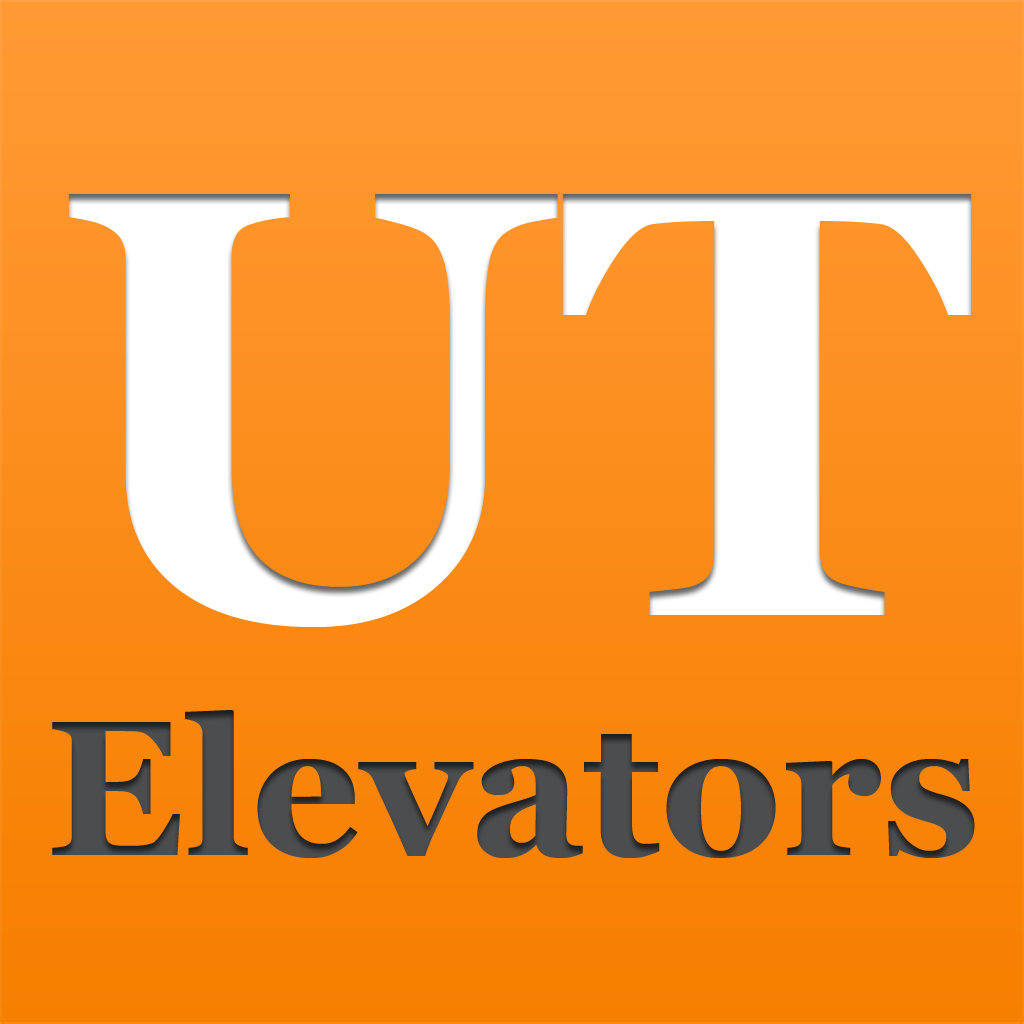
<style>
.page{position:relative;width:1024px;height:1024px}
.page>*{position:absolute;margin:0}
.t1{font:192px/240px "Georgia-Bold";color:#4c4d4f}
.t2{font:608px/240px "Georgia-Bold";color:#ffffff}
</style>
<div class="page">
<p class="t1" style="left:52px;top:194px;width:923px;height:664px;text-align:center"><span class="t2">UT<br></span>Elevators</p>
</div>
